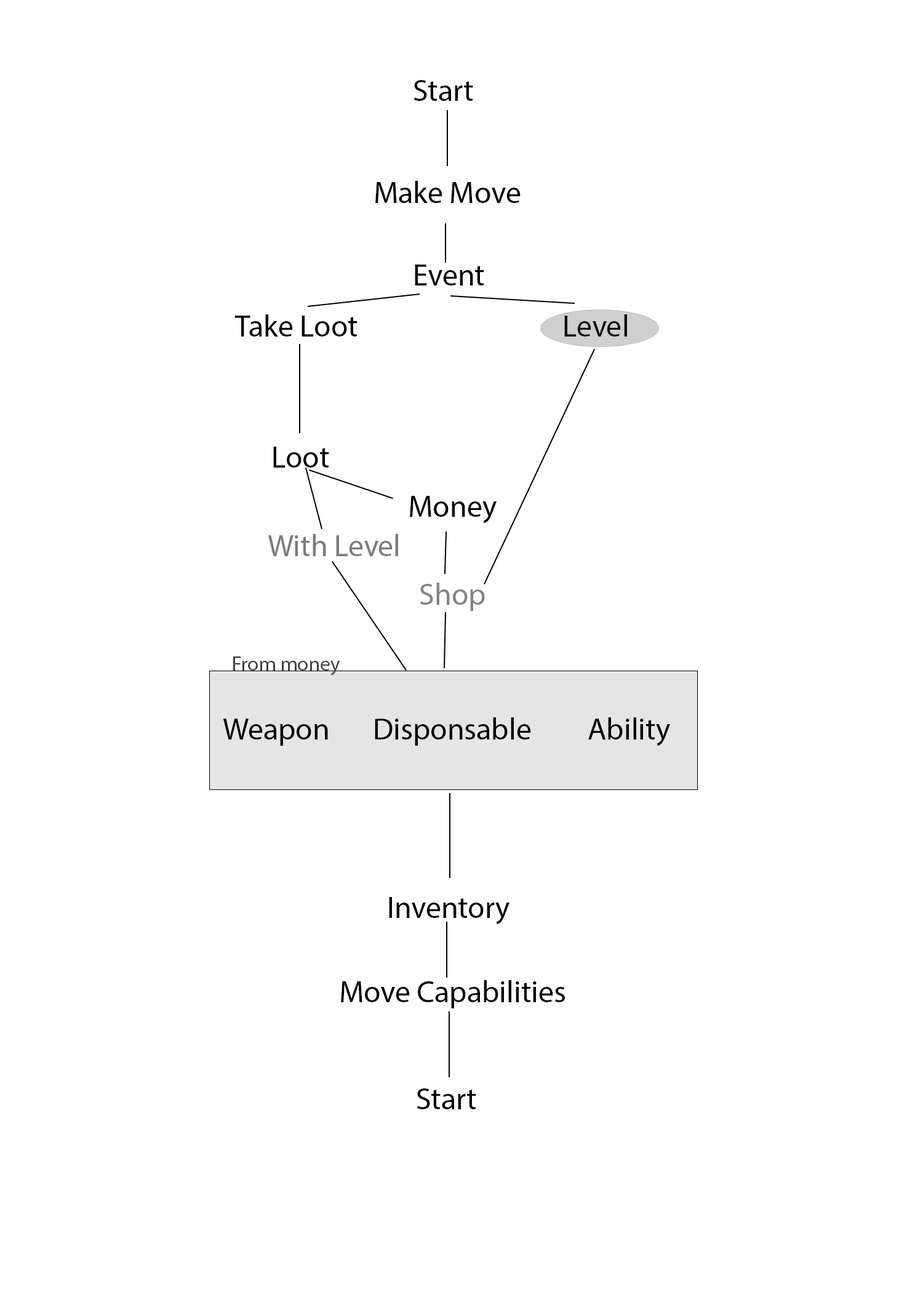
<style>
.page{position:relative;width:923px;height:1292px;background:#ffffff}
.page>*{position:absolute;margin:0}
.t1{font:30.8px "MyriadPro-Regular";color:#000000}
.t2{font:30.8px "MyriadPro-Regular";color:#7c7c7c}
.t3{font:30.8px "MyriadPro-Regular";color:#838383}
.t4{font:20.5px "MyriadPro-Regular";color:#414141}
</style>
<div class="page">
<p class="t1" style="left:413px;top:80px;width:60px;height:21px">Start</p>
<p class="t1" style="left:375px;top:181px;width:146px;height:22px">Make Move</p>
<p class="t1" style="left:415px;top:265px;width:69px;height:20px">Event</p>
<p class="t1" style="left:234px;top:314px;width:123px;height:23px">Take Loot</p>
<p class="t1" style="left:564px;top:314px;width:63px;height:23px">Level</p>
<p class="t1" style="left:273px;top:447px;width:56px;height:21px">Loot</p>
<p class="t1" style="left:410px;top:496px;width:87px;height:28px">Money</p>
<p class="t2" style="left:268px;top:534px;width:130px;height:22px">With Level</p>
<p class="t3" style="left:420px;top:583px;width:65px;height:28px">Shop</p>
<p class="t4" style="left:233px;top:656px;width:107px;height:20px">From money</p>
<p class="t1" style="left:223px;top:719px;width:105px;height:27px">Weapon</p>
<p class="t1" style="left:375px;top:717px;width:156px;height:29px">Disponsable</p>
<p class="t1" style="left:588px;top:717px;width:82px;height:29px">Ability</p>
<p class="t1" style="left:389px;top:897px;width:120px;height:28px">Inventory</p>
<p class="t1" style="left:341px;top:980px;width:224px;height:28px">Move Сapabilities</p>
<p class="t1" style="left:417px;top:1088px;width:59px;height:21px">Start</p>
</div>
